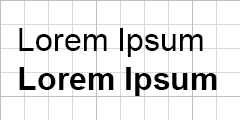
<style>
.page{position:relative;width:240px;height:120px;background:#ffffff}
.page>*{position:absolute;margin:0}
.t1{font:32px "ArialMT";color:#000000}
.t2{font:32px "Arial-BoldMT";color:#000000}
</style>
<div class="page">
<p class="t1" style="left:19px;top:28px;width:198px;height:68px">Lorem Ipsum<br><span class="t2">Lorem Ipsum</span></p>
</div>
